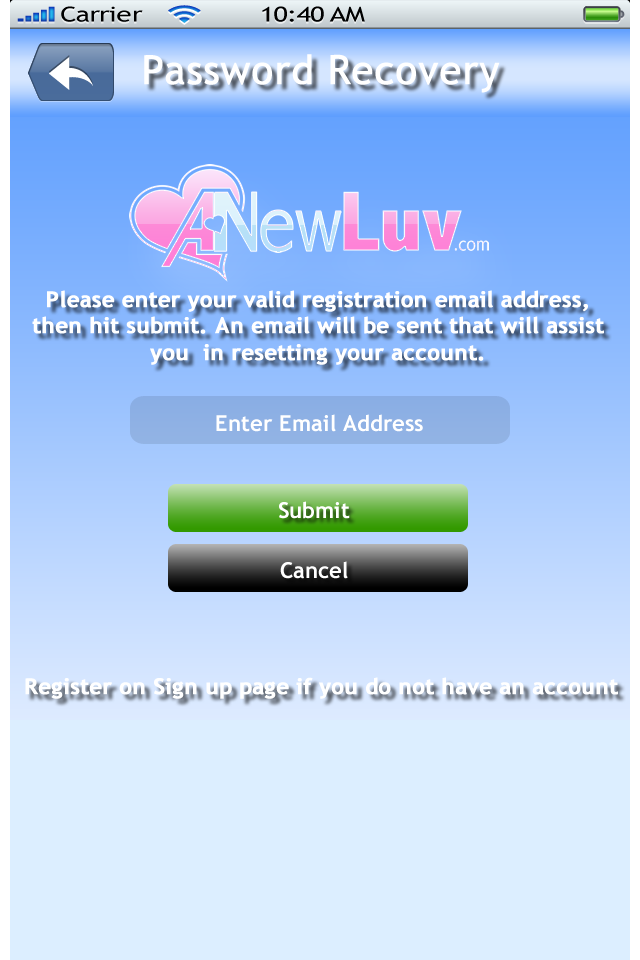
<style>
.page{position:relative;width:640px;height:960px;background:#dceeff}
.page>*{position:absolute;margin:0}
.t1{font:40px "TrebuchetMS";color:#ffffff;font-weight:bold}
.t2{font:22px/26.4px "TrebuchetMS-Bold";color:#ffffff;font-weight:bold}
.t3{font:22px "TrebuchetMS-Bold";color:#ffffff}
.t4{font:22px "TrebuchetMS-Bold";color:#ffffff;font-weight:bold}
</style>
<div class="page">
<p class="t1" style="left:144px;top:54px;width:356px;height:39px">Password Recovery</p>
<p class="t2" style="left:32px;top:290px;width:572px;height:75px;text-align:center">Please enter your valid registration email address, then hit submit. An email will be sent that will assist you  in resetting your account.</p>
<p class="t3" style="left:216px;top:414px;width:207px;height:18px">Enter Email Address</p>
<p class="t3" style="left:279px;top:501px;width:71px;height:18px">Submit</p>
<p class="t3" style="left:280px;top:561px;width:68px;height:18px">Cancel</p>
<p class="t4" style="left:25px;top:677px;width:593px;height:22px">Register on Sign up page if you do not have an account</p>
</div>
